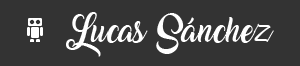
<style>
.page{position:relative;width:300px;height:66px;background:#333333}
.page>*{position:absolute;margin:0}
.t1{font:22px "Amarillo";color:#ffffff}
</style>
<div class="page">
<p class="t1" style="left:66px;top:12px;width:208px;height:45px">Lucas Sánchez</p>
</div>
